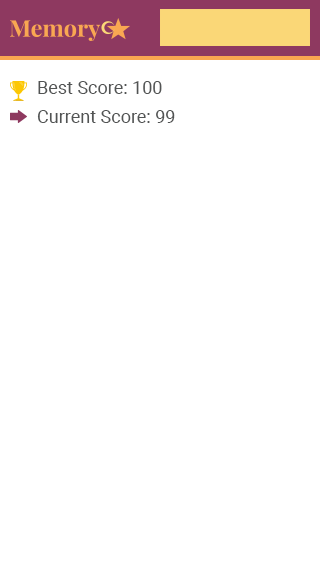
<style>
.page{position:relative;width:320px;height:568px;background:#ffffff}
.page>*{position:absolute;margin:0}
.t1{font:18px "Roboto-Regular";color:#525454}
</style>
<div class="page">
<p class="t1" style="left:38px;top:81px;width:124px;height:13px">Best Score: 100</p>
<p class="t1" style="left:37px;top:110px;width:138px;height:13px">Current Score: 99</p>
</div>
